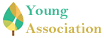
<style>
.page{position:relative;width:104px;height:38px;background:#ffffff}
.page>*{position:absolute;margin:0}
.t1{font:15px "BellMTBold";color:#cdb143}
.t2{font:15px "BellMTBold";color:#33b890}
</style>
<div class="page">
<p class="t1" style="left:25px;top:5px;width:77px;height:28px"><span class="t2">Young<br></span>Association</p>
</div>
